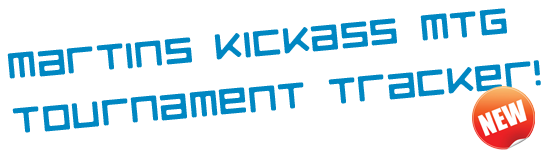
<style>
.page{position:relative;width:550px;height:150px;background:#ffffff}
.page>*{position:absolute;margin:0}
.t1{font:45.8px "RazerRegular";color:#0088c3}
</style>
<div class="page">
<p class="t1" style="left:7px;top:8px;width:534px;height:125px;rotate:-5deg">Martins Kickass MTG <br>Tournament Tracker!</p>
</div>
